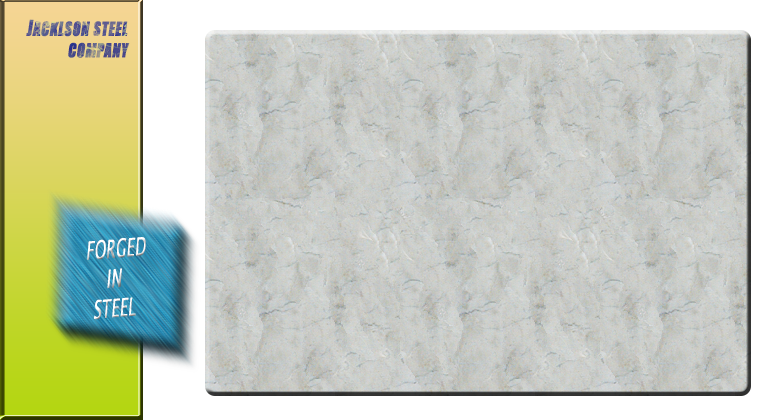
<style>
.page{position:relative;width:775px;height:420px}
.page>*{position:absolute;margin:0}
.t1{font:18px "Impact";letter-spacing:0.025em;font-weight:bold;font-style:italic;scale:0.8 1}
.t2{font:20.3px "Impact";letter-spacing:0.025em;font-weight:bold;font-style:italic;scale:0.8 1}
.t3{font:24.8px "LucidaSans";letter-spacing:0.025em;color:#ffffff;font-weight:bold;font-style:italic;scale:0.57 1}
</style>
<div class="page">
<p class="t1" style="left:26px;top:19px;width:104px;height:39px"><span class="t2">J</span>ACKLSON STEEL<br>COMPANY</p>
<p class="t3" style="left:87px;top:237px;width:59px;height:83px;text-align:center;rotate:-5deg">FORGED <br>IN<br>STEEL</p>
</div>
